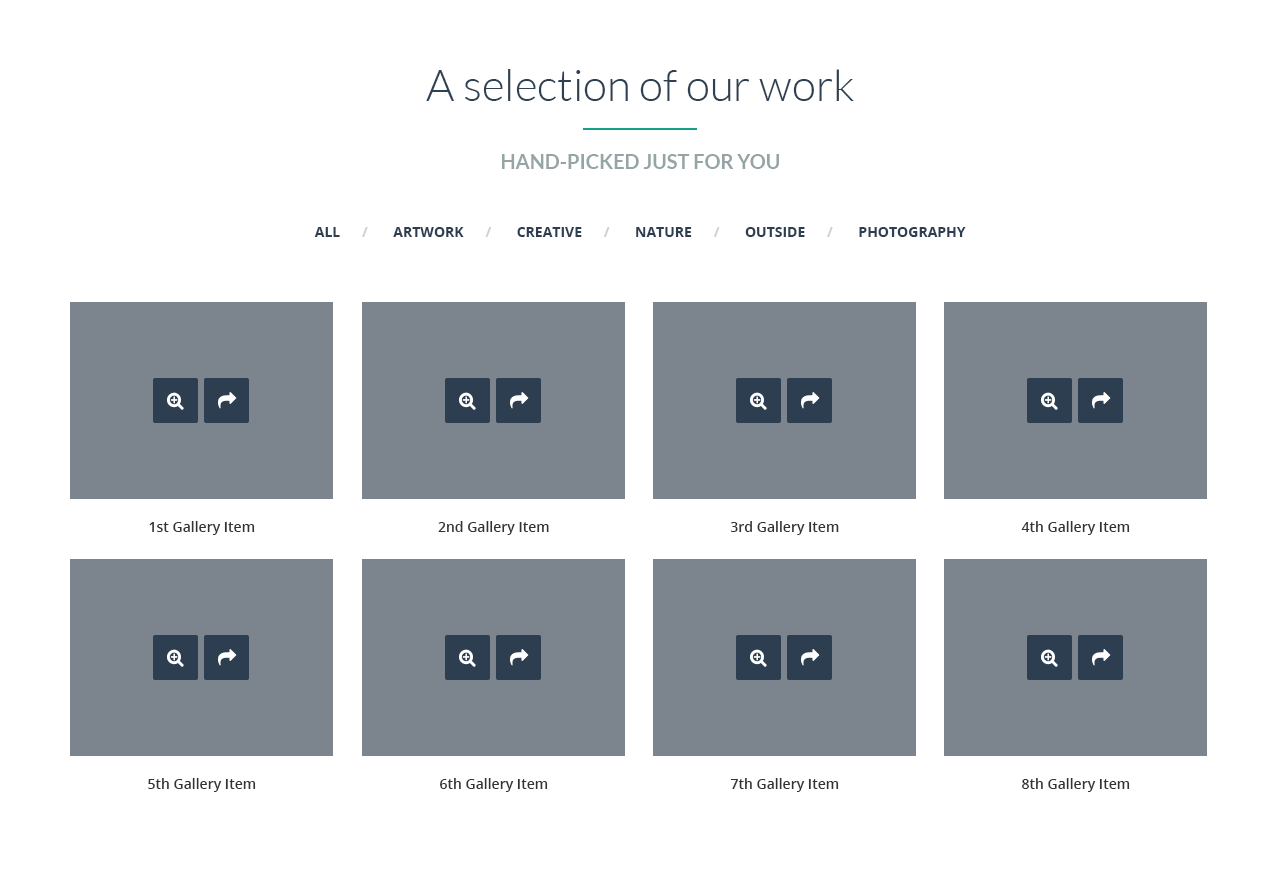
<style>
.page{position:relative;width:1280px;height:876px;background:#ffffff}
.page>*{position:absolute;margin:0}
.t1{font:44px "Lato-Light";color:#2e4052}
.t2{font:20px "Lato-Bold";color:#95a5a6}
.t3{font:14px "OpenSans-Bold";color:#2c3e50}
.t4{font:14px "OpenSans-Bold";color:#d0d0d0}
.t5{font:14px "OpenSans-Semibold";color:#333333}
</style>
<div class="page">
<p class="t1" style="left:426px;top:69px;width:428px;height:32px">A selection of our work</p>
<p class="t2" style="left:502px;top:154px;width:277px;height:15px">HAND-PICKED JUST FOR YOU</p>
<p class="t3" style="left:314px;top:227px;width:652px;height:10px">ALL      <span class="t4">/</span>       ARTWORK      <span class="t4">/ </span>      CREATIVE      <span class="t4">/</span>       NATURE      <span class="t4">/</span>       OUTSIDE      <span class="t4">/</span>       PHOTOGRAPHY</p>
<p class="t5" style="left:149px;top:521px;width:106px;height:14px">1st Gallery Item</p>
<p class="t5" style="left:438px;top:521px;width:111px;height:14px">2nd Gallery Item</p>
<p class="t5" style="left:730px;top:521px;width:109px;height:14px">3rd Gallery Item</p>
<p class="t5" style="left:1021px;top:521px;width:109px;height:14px">4th Gallery Item</p>
<p class="t5" style="left:148px;top:778px;width:108px;height:14px">5th Gallery Item</p>
<p class="t5" style="left:440px;top:778px;width:108px;height:14px">6th Gallery Item</p>
<p class="t5" style="left:730px;top:778px;width:109px;height:14px">7th Gallery Item</p>
<p class="t5" style="left:1022px;top:778px;width:108px;height:14px">8th Gallery Item</p>
</div>
